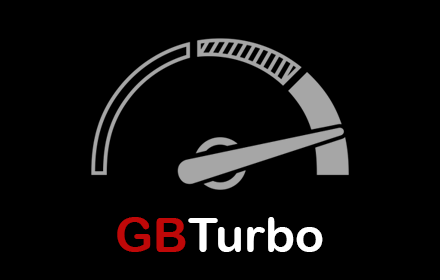
<style>
.page{position:relative;width:440px;height:280px;background:#000000}
.page>*{position:absolute;margin:0}
.t1{font:48px "ArialRoundedMTBold";color:#ffffff}
.t2{font:48px "ArialRoundedMTBold";color:#bf0808}
</style>
<div class="page">
<p class="t1" style="left:117px;top:217px;width:206px;height:35px"><span class="t2">GB</span>Turbo</p>
</div>
